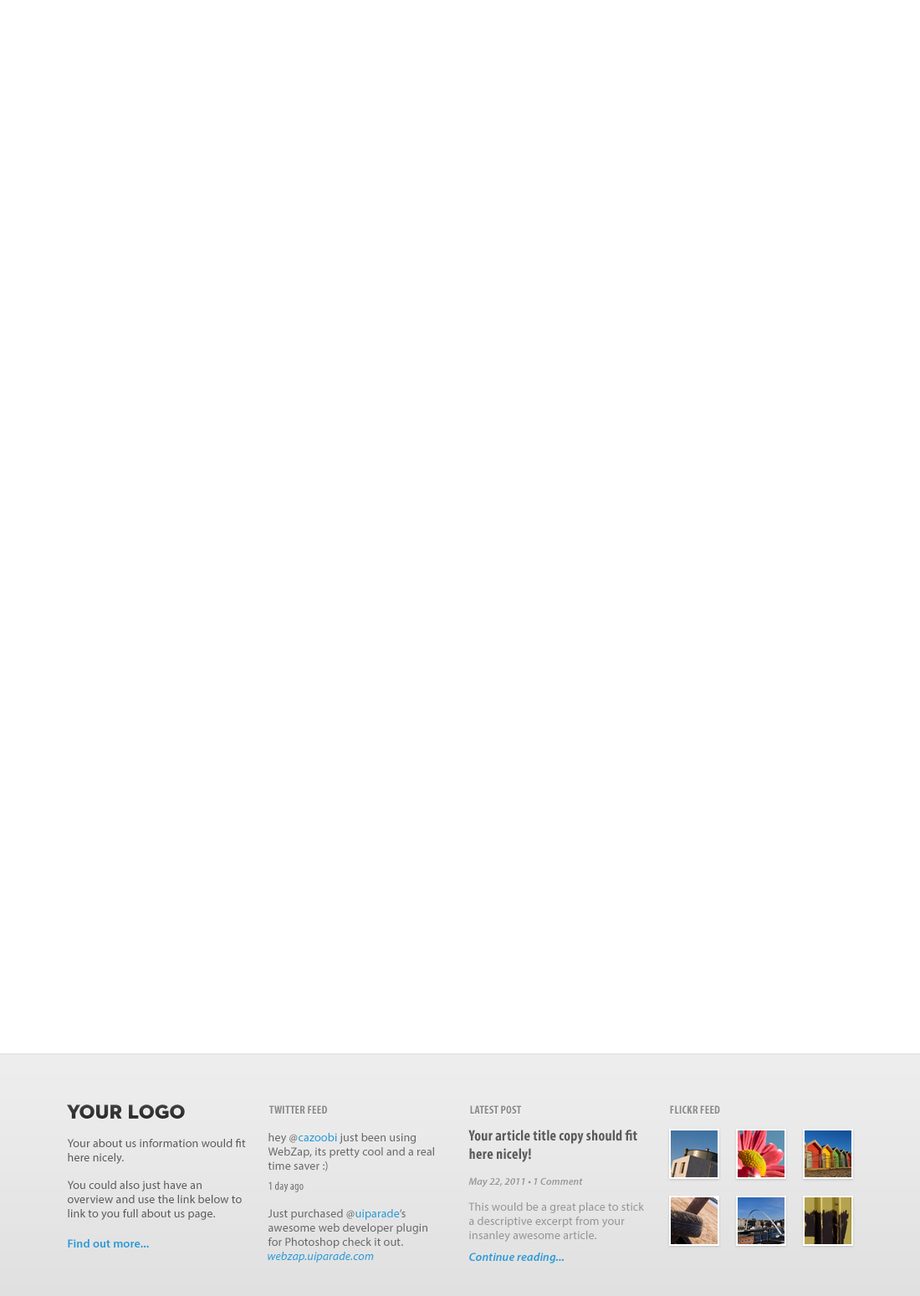
<style>
.page{position:relative;width:920px;height:1296px;background:#ffffff}
.page>*{position:absolute;margin:0}
.t1{font:11.7px "MyriadPro-BoldCond";letter-spacing:0.013em;color:#8a8989}
.t2{font:11.7px "MyriadPro-Regular";letter-spacing:0.013em;color:#6a6969}
.t3{font:11.7px/20.1px "MyriadPro-Cond";letter-spacing:0.013em;color:#6a6969}
.t4{font:11.7px "MyriadPro-Regular";letter-spacing:0.013em;color:#2a99d8}
.t5{font:11.7px "MyriadPro-Regular";letter-spacing:0.013em;color:#959595}
.t6{font:15.1px "MyriadPro-BoldCond";letter-spacing:0.013em;color:#5c5b5b}
.t7{font:10px "MyriadPro-SemiboldIt";letter-spacing:0.013em;color:#999797}
.t8{font:11.7px "MyriadPro-Regular";letter-spacing:0.013em;color:#5d5c5c}
.t9{font:11.7px "MyriadPro-Semibold";letter-spacing:0.013em;color:#2a99d8}
.t10{font:11.7px "MyriadPro-It";letter-spacing:0.013em;color:#2a99d8}
.t11{font:11.7px "MyriadPro-SemiboldIt";letter-spacing:0.013em;color:#2a99d8}
</style>
<div class="page">
<p class="t1" style="left:269px;top:1106px;width:58px;height:8px">TWITTER FEED</p>
<p class="t1" style="left:470px;top:1106px;width:51px;height:8px">LATEST POST</p>
<p class="t1" style="left:670px;top:1106px;width:50px;height:8px">FLICKR FEED</p>
<p class="t2" style="left:268px;top:1133px;width:166px;height:116px">hey @                just been using WebZap, its pretty cool and a real time saver :)<br><span class="t3">1 day ago<br></span><br>Just purchased @                 ’s <br>awesome web developer plugin for Photoshop check it out.</p>
<p class="t4" style="left:299px;top:1133px;width:38px;height:9px">cazoobi</p>
<p class="t5" style="left:468px;top:1130px;width:176px;height:112px"><span class="t6">Your article title copy should fit here nicely!<br><br></span><span class="t7">May 22, 2011 • 1 Comment<br><br></span>This would be a great place to stick a descriptive excerpt from your insanley awesome article.</p>
<p class="t8" style="left:67px;top:1139px;width:179px;height:81px">Your about us information would fit here nicely. <br><br>You could also just have an overview and use the link below to link to you full about us page.</p>
<p class="t4" style="left:355px;top:1209px;width:45px;height:11px">uiparade</p>
<p class="t9" style="left:68px;top:1239px;width:81px;height:9px">Find out more...</p>
<p class="t10" style="left:268px;top:1252px;width:106px;height:11px">webzap.uiparade.com</p>
<p class="t11" style="left:469px;top:1253px;width:95px;height:11px">Continue reading...</p>
</div>
